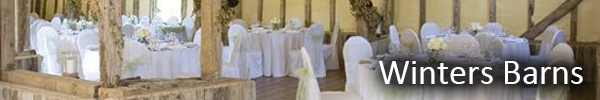
<style>
.page{position:relative;width:600px;height:100px}
.page>*{position:absolute;margin:0}
.t1{font:36px "Calibri";color:#ffffff}
</style>
<div class="page">
<p class="t1" style="left:379px;top:61px;width:204px;height:23px">Winters Barns</p>
</div>
